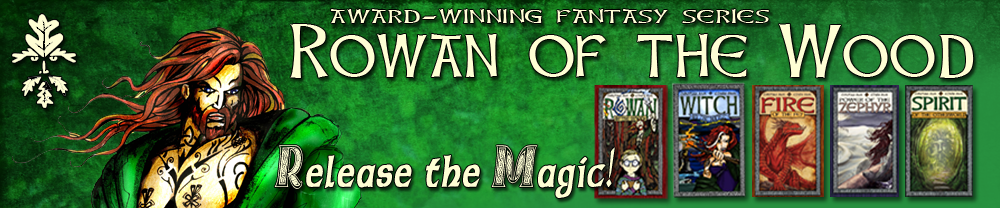
<style>
.page{position:relative;width:1000px;height:208px}
.page>*{position:absolute;margin:0}
.t1{font:20.5px "CelticHand";letter-spacing:0.025em;color:#fefed4;scale:1.58 1}
.t2{font:20.5px "CelticBold";letter-spacing:0.025em;color:#fefed4;scale:1.58 1}
.t3{font:65.8px "CelticHand";letter-spacing:0.025em;color:#fefed4;scale:1.06 1}
.t4{font:41.6px "CelticmdDecorativeWDropCaps";letter-spacing:0.05em;color:#fefed4;font-style:italic;scale:0.6 1}
</style>
<div class="page">
<p class="t1" style="left:331px;top:8px;width:438px;height:16px">award<span class="t2">-</span>winning fantasy series</p>
<p class="t3" style="left:290px;top:24px;width:684px;height:54px">Rowan of the Wood</p>
<p class="t4" style="left:274px;top:145px;width:341px;height:53px">Release the Magic!</p>
</div>
